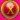
<style>
.page{position:relative;width:20px;height:20px;background:#ff0080}
.page>*{position:absolute;margin:0}
.t1{font:14px "SitkaBanner";color:#eac966}
</style>
<div class="page">
<p class="t1" style="left:6px;top:5px;width:9px;height:9px">X</p>
</div>
